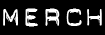
<style>
.page{position:relative;width:105px;height:35px;background:#000000}
.page>*{position:absolute;margin:0}
.t1{font:36px "Blackout";color:#000000}
</style>
<div class="page">
<p class="t1" style="left:0px;top:0px;width:106px;height:35px">MERch</p>
</div>
